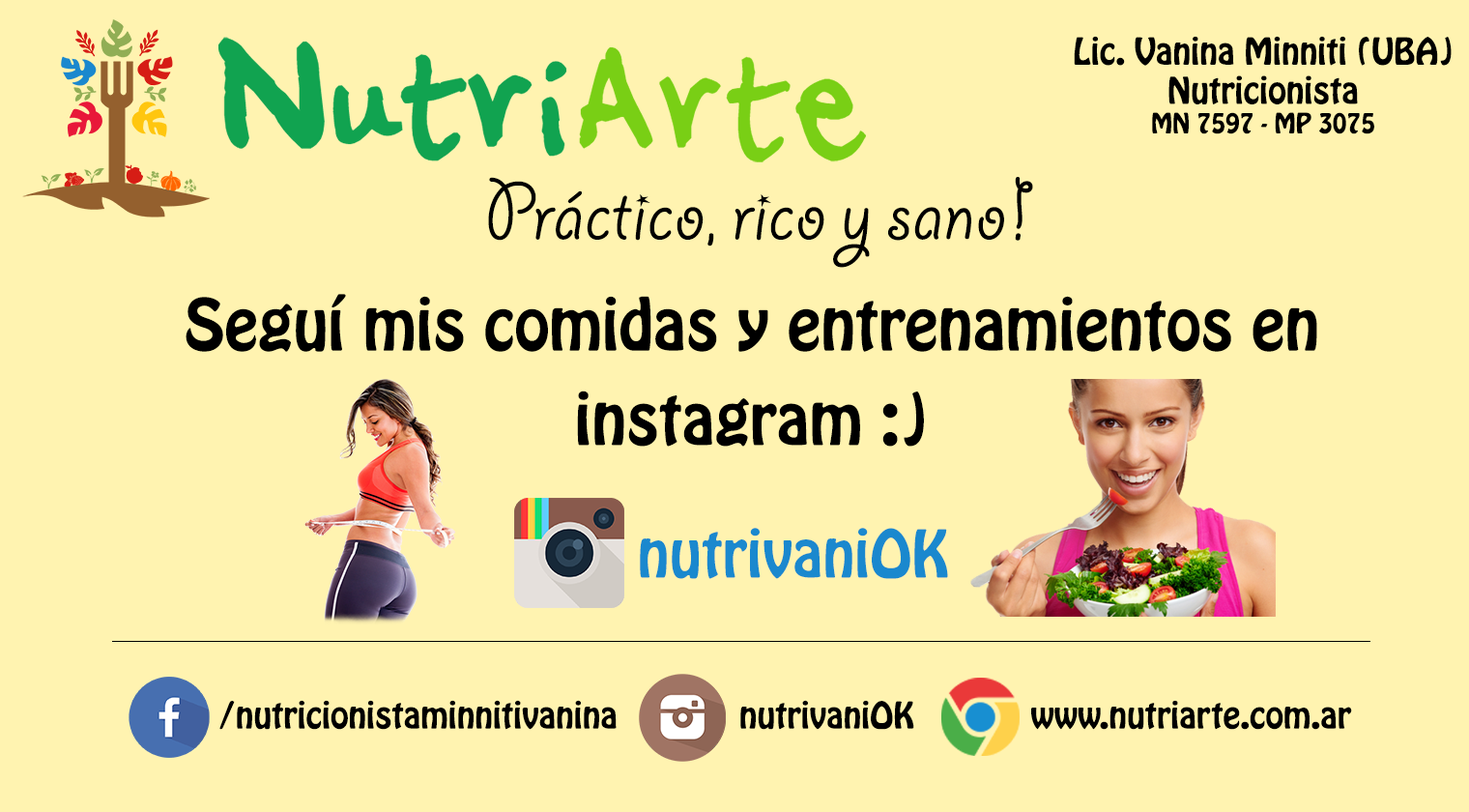
<style>
.page{position:relative;width:1469px;height:812px;background:#fff3b0}
.page>*{position:absolute;margin:0}
.t1{font:32.7px "HoboStd";color:#000000}
.t2{font:24.5px "HoboStd";color:#000000}
.t3{font:90.8px "GiddyupStd";color:#000000}
.t4{font:63px "HoboStd";color:#000000}
.t5{font:58px "HoboStd";color:#1a88ce}
.t6{font:32.5px "HoboStd";color:#000000}
</style>
<div class="page">
<p class="t1" style="left:1074px;top:36px;width:378px;height:98px;text-align:center">Lic. Vanina Minniti (UBA)<br>Nutricionista<br><span class="t2">MN 7597 - MP 3075</span></p>
<p class="t3" style="left:488px;top:177px;width:545px;height:91px">Práctico, rico y sano!</p>
<p class="t4" style="left:186px;top:294px;width:1131px;height:58px">Seguí mis comidas y entrenamientos en</p>
<p class="t4" style="left:577px;top:390px;width:347px;height:56px">instagram :)</p>
<p class="t5" style="left:640px;top:528px;width:308px;height:51px">nutrivaniOK</p>
<p class="t6" style="left:219px;top:700px;width:398px;height:30px">/nutricionistaminnitivanina</p>
<p class="t6" style="left:740px;top:700px;width:174px;height:30px">nutrivaniOK</p>
<p class="t6" style="left:1031px;top:700px;width:321px;height:30px">www.nutriarte.com.ar</p>
</div>
